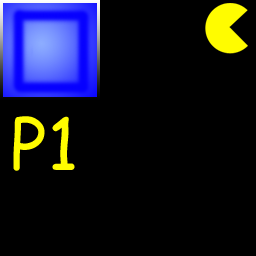
<style>
.page{position:relative;width:256px;height:256px;background:#000000}
.page>*{position:absolute;margin:0}
.t1{font:70px "ComicSansMS";color:#fffc00}
</style>
<div class="page">
<p class="t1" style="left:13px;top:116px;width:62px;height:55px">P1</p>
</div>
